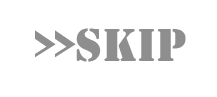
<style>
.page{position:relative;width:217px;height:97px;background:#ffffff}
.page>*{position:absolute;margin:0}
.t1{font:48px "Stencil";color:#8e8e8e}
</style>
<div class="page">
<p class="t1" style="left:35px;top:28px;width:151px;height:34px">skip&lt;&lt;</p>
</div>
